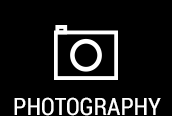
<style>
.page{position:relative;width:172px;height:116px;background:#000000}
.page>*{position:absolute;margin:0}
.t1{font:24px "RobotoCondensed-Regular";color:#ffffff;text-transform:uppercase}
</style>
<div class="page">
<p class="t1" style="left:14px;top:97px;width:147px;height:19px">photography</p>
</div>
